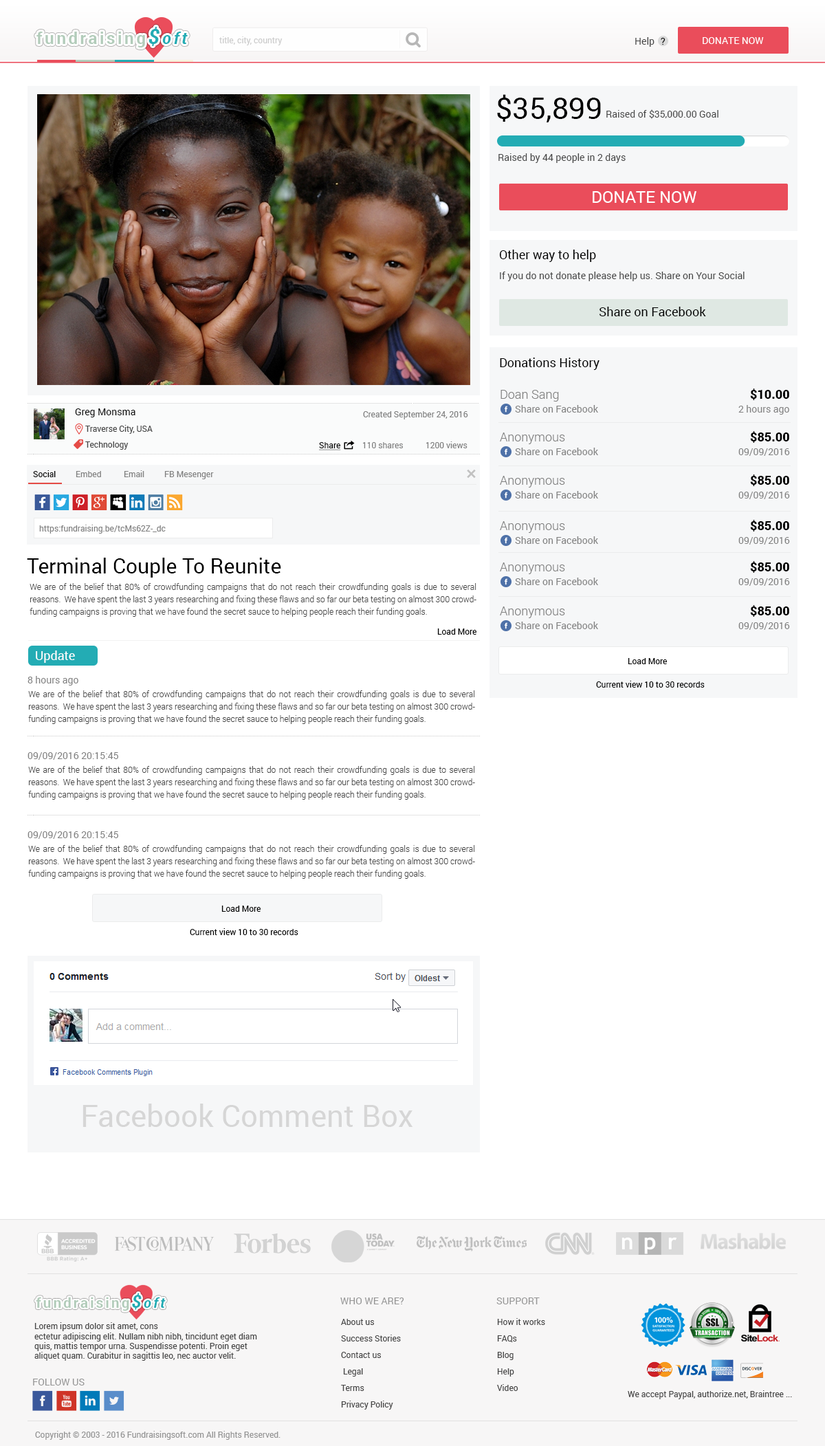
<style>
.page{position:relative;width:825px;height:1446px;background:#ffffff}
.page>*{position:absolute;margin:0}
.t1{font:16.5px "Roboto-Bold";letter-spacing:0.15em;color:#b2ccba}
.t2{font:20.6px "Roboto-BoldItalic";letter-spacing:0.15em;color:#23acb4}
.t3{font:16.5px "Roboto-BoldItalic";letter-spacing:0.15em;color:#23acb4}
.t4{font:8.2px "Roboto-Regular";color:#cccccc}
.t5{font:9.6px "Roboto-Regular";color:#464646}
.t6{font:9.6px "Roboto-Regular";color:#000000}
.t7{font:9.6px "Roboto-Regular";color:#ffffff;text-transform:uppercase}
.t8{font:29.9px "Roboto-Regular";color:#000000}
.t9{font:16.5px "Roboto-Regular";color:#ffffff;text-transform:uppercase}
.t10{font:12.4px "Roboto-Regular";color:#000000}
.t11{font:12.4px "Roboto-Light";color:#818181}
.t12{font:12.4px "Roboto-Black";color:#000000}
.t13{font:8.2px "Roboto-Regular";color:#818181}
.t14{font:9.6px "Roboto-Regular";color:#818181}
.t15{font:8.2px "Roboto-Regular";color:#464646}
.t16{font:8.2px "Roboto-Regular";color:#000000;text-decoration:underline}
.t17{font:8.2px "Roboto-Regular";color:#000000}
.t18{font:20.6px "Roboto-Regular";color:#000000}
.t19{font:8.2px/12.4px "Roboto-Light";color:#464646}
.t20{font:12.4px "Roboto-Regular";color:#ffffff}
.t21{font:30.3px "Roboto-Regular";color:#d6d6d6}
.t22{font:9.6px "Roboto-Regular";color:#959595;text-transform:uppercase}
.t23{font:8.2px/16.5px "Roboto-Regular";color:#464646}
.t24{font:8.2px "Roboto-Regular";color:#959595}
</style>
<div class="page">
<p class="t1" style="left:36px;top:27px;width:152px;height:20px">fundraising<span class="t2">$</span><span class="t3">oft</span></p>
<p class="t4" style="left:219px;top:36px;width:64px;height:9px">title, city, country</p>
<p class="t5" style="left:635px;top:37px;width:19px;height:10px">Help</p>
<p class="t6" style="left:661px;top:38px;width:4px;height:7px">?</p>
<p class="t7" style="left:703px;top:37px;width:61px;height:7px">Donate now</p>
<p class="t8" style="left:497px;top:94px;width:104px;height:28px">$35,899</p>
<p class="t5" style="left:606px;top:109px;width:112px;height:10px">Raised of $35,000.00 Goal</p>
<p class="t5" style="left:498px;top:153px;width:128px;height:10px">Raised by 44 people in 2 days</p>
<p class="t9" style="left:593px;top:191px;width:103px;height:12px">donate now</p>
<p class="t10" style="left:499px;top:250px;width:97px;height:12px">Other way to help</p>
<p class="t5" style="left:500px;top:272px;width:244px;height:9px">If you do not donate please help us. Share on Your Social</p>
<p class="t10" style="left:599px;top:307px;width:107px;height:9px">Share on Facebook</p>
<p class="t10" style="left:500px;top:357px;width:99px;height:13px">Donations History</p>
<p class="t11" style="left:500px;top:390px;width:59px;height:11px">Doan Sang</p>
<p class="t12" style="left:750px;top:388px;width:39px;height:12px">$10.00</p>
<p class="t6" style="left:75px;top:408px;width:60px;height:9px">Greg Monsma</p>
<p class="t13" style="left:363px;top:411px;width:105px;height:8px">Created September 24, 2016</p>
<p class="t14" style="left:515px;top:405px;width:83px;height:7px">Share on Facebook</p>
<p class="t14" style="left:738px;top:405px;width:51px;height:9px">2 hours ago</p>
<p class="t15" style="left:85px;top:425px;width:68px;height:9px">Traverse City, USA</p>
<p class="t11" style="left:500px;top:432px;width:65px;height:12px">Anonymous</p>
<p class="t12" style="left:750px;top:431px;width:39px;height:12px">$85.00</p>
<p class="t15" style="left:85px;top:441px;width:44px;height:9px">Technology</p>
<p class="t16" style="left:319px;top:442px;width:22px;height:8px">Share</p>
<p class="t13" style="left:363px;top:442px;width:40px;height:6px">110 shares</p>
<p class="t13" style="left:426px;top:441px;width:41px;height:7px">1200 views</p>
<p class="t14" style="left:515px;top:447px;width:83px;height:8px">Share on Facebook</p>
<p class="t14" style="left:738px;top:448px;width:52px;height:8px">09/09/2016</p>
<p class="t17" style="left:33px;top:470px;width:23px;height:7px">Social</p>
<p class="t13" style="left:76px;top:471px;width:25px;height:6px">Embed</p>
<p class="t13" style="left:124px;top:470px;width:20px;height:7px">Email</p>
<p class="t13" style="left:164px;top:471px;width:50px;height:8px">FB Mesenger</p>
<p class="t11" style="left:500px;top:476px;width:65px;height:11px">Anonymous</p>
<p class="t12" style="left:750px;top:474px;width:39px;height:12px">$85.00</p>
<p class="t14" style="left:515px;top:491px;width:83px;height:7px">Share on Facebook</p>
<p class="t14" style="left:738px;top:491px;width:52px;height:8px">09/09/2016</p>
<p class="t11" style="left:500px;top:521px;width:65px;height:12px">Anonymous</p>
<p class="t12" style="left:750px;top:520px;width:39px;height:11px">$85.00</p>
<p class="t13" style="left:39px;top:524px;width:127px;height:9px">https:fundraising.be/tcMs62Z-_dc</p>
<p class="t14" style="left:515px;top:536px;width:83px;height:8px">Share on Facebook</p>
<p class="t14" style="left:738px;top:537px;width:52px;height:7px">09/09/2016</p>
<p class="t18" style="left:27px;top:557px;width:254px;height:20px">Terminal Couple To Reunite</p>
<p class="t11" style="left:500px;top:562px;width:65px;height:12px">Anonymous</p>
<p class="t12" style="left:750px;top:561px;width:39px;height:12px">$85.00</p>
<p class="t14" style="left:515px;top:577px;width:83px;height:8px">Share on Facebook</p>
<p class="t14" style="left:738px;top:578px;width:52px;height:8px">09/09/2016</p>
<p class="t19" style="left:30px;top:583px;width:446px;height:34px;text-align:justify">We are of the belief that 80% of crowdfunding campaigns that do not reach their crowdfunding goals is due to several reasons.  We have spent the last 3 years researching and fixing these flaws and so far our beta testing on almost 300 crowdfunding campaigns is proving that we have found the secret sauce to helping people reach their funding goals.</p>
<p class="t12" style="left:750px;top:605px;width:39px;height:12px">$85.00</p>
<p class="t11" style="left:500px;top:606px;width:65px;height:12px">Anonymous</p>
<p class="t17" style="left:437px;top:628px;width:39px;height:6px">Load More</p>
<p class="t14" style="left:515px;top:621px;width:83px;height:8px">Share on Facebook</p>
<p class="t14" style="left:738px;top:622px;width:52px;height:8px">09/09/2016</p>
<p class="t20" style="left:36px;top:650px;width:39px;height:13px">Update</p>
<p class="t17" style="left:628px;top:658px;width:39px;height:6px">Load More</p>
<p class="t14" style="left:27px;top:676px;width:51px;height:9px">8 hours ago</p>
<p class="t17" style="left:596px;top:681px;width:109px;height:6px">Current view 10 to 30 records</p>
<p class="t19" style="left:28px;top:690px;width:447px;height:34px;text-align:justify">We are of the belief that 80% of crowdfunding campaigns that do not reach their crowdfunding goals is due to several reasons.  We have spent the last 3 years researching and fixing these flaws and so far our beta testing on almost 300 crowdfunding campaigns is proving that we have found the secret sauce to helping people reach their funding goals.</p>
<p class="t14" style="left:27px;top:752px;width:91px;height:8px">09/09/2016 20:15:45</p>
<p class="t19" style="left:28px;top:766px;width:447px;height:33px;text-align:justify">We are of the belief that 80% of crowdfunding campaigns that do not reach their crowdfunding goals is due to several reasons.  We have spent the last 3 years researching and fixing these flaws and so far our beta testing on almost 300 crowdfunding campaigns is proving that we have found the secret sauce to helping people reach their funding goals.</p>
<p class="t14" style="left:27px;top:831px;width:91px;height:8px">09/09/2016 20:15:45</p>
<p class="t19" style="left:28px;top:845px;width:447px;height:33px;text-align:justify">We are of the belief that 80% of crowdfunding campaigns that do not reach their crowdfunding goals is due to several reasons.  We have spent the last 3 years researching and fixing these flaws and so far our beta testing on almost 300 crowdfunding campaigns is proving that we have found the secret sauce to helping people reach their funding goals.</p>
<p class="t17" style="left:221px;top:905px;width:40px;height:6px">Load More</p>
<p class="t17" style="left:190px;top:928px;width:108px;height:7px">Current view 10 to 30 records</p>
<p class="t21" style="left:82px;top:1103px;width:331px;height:24px">Facebook Comment Box</p>
<p class="t22" style="left:340px;top:1297px;width:64px;height:7px">Who we are?</p>
<p class="t22" style="left:496px;top:1297px;width:44px;height:7px">SUPPORT</p>
<p class="t15" style="left:34px;top:1322px;width:223px;height:38px">Lorem ipsum dolor sit amet, cons<br>ectetur adipiscing elit. Nullam nibh nibh, tincidunt eget diam quis, mattis tempor urna. Suspendisse potenti. Proin eget aliquet quam. Curabitur in sagittis leo, nec auctor velit.</p>
<p class="t23" style="left:341px;top:1318px;width:60px;height:91px">About us<br>Success Stories<br>Contact us<br> Legal<br>Terms<br>Privacy Policy</p>
<p class="t23" style="left:497px;top:1318px;width:48px;height:73px">How it works<br>FAQs<br>Blog<br>Help<br>Video</p>
<p class="t22" style="left:33px;top:1378px;width:52px;height:7px">follow us</p>
<p class="t15" style="left:628px;top:1390px;width:164px;height:9px">We accept Paypal, authorize.net, Braintree ...</p>
<p class="t24" style="left:35px;top:1430px;width:245px;height:9px">Copyright © 2003 - 2016 Fundraisingsoft.com All Rights Reserved.</p>
</div>
